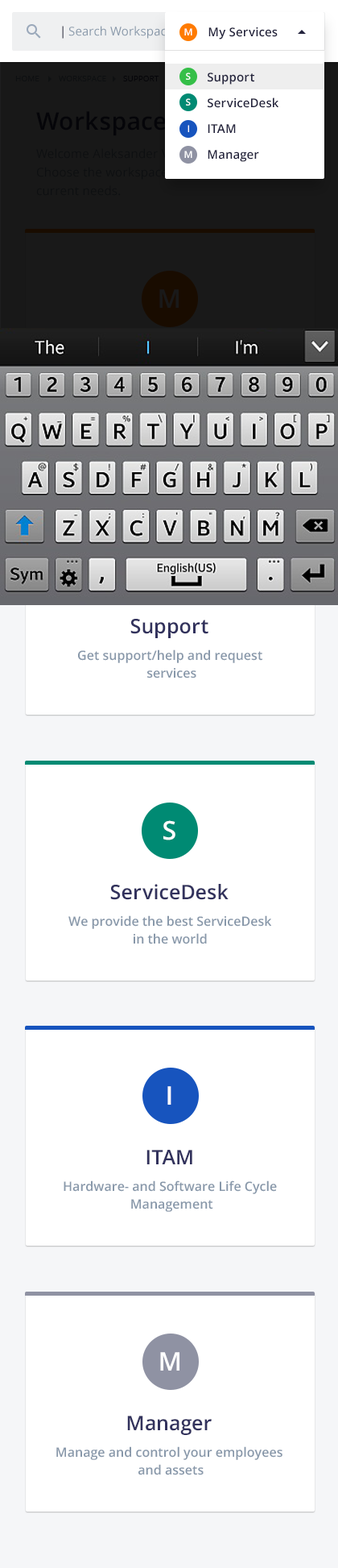
<style>
.page{position:relative;width:338px;height:1568px;background:#ffffff}
.page>*{position:absolute;margin:0}
.t1{font:12.1px "OpenSans-Semibold";letter-spacing:0.01em}
.t2{font:12.1px "OpenSans";letter-spacing:0.01em;color:#8898aa}
.t3{font:9.7px "OpenSans-Semibold";letter-spacing:0.01em;color:#ffffff}
.t4{font:12.1px "OpenSans-Semibold";letter-spacing:0.01em;color:#23233d}
.t5{font:8.1px "OpenSans";color:#0d0f11;text-transform:uppercase}
.t6{font:8.1px "OpenSans";color:#050509;text-transform:uppercase}
.t7{font:25.7px "OpenSans-Semibold";letter-spacing:0.005em;color:#191919}
.t8{font:20.1px "OpenSans-Semibold";letter-spacing:0.005em;color:#32325d}
.t9{font:12.9px/17.7px "OpenSans-Semibold";color:#8898aa}
.t10{font:25.7px "OpenSans-Semibold";letter-spacing:0.005em;color:#ffffff}
</style>
<div class="page">
<p class="t1" style="left:62px;top:26px;width:2px;height:13px">|</p>
<p class="t2" style="left:68px;top:26px;width:111px;height:13px">Search Workspaces</p>
<p class="t3" style="left:185px;top:28px;width:8px;height:7px">M</p>
<p class="t4" style="left:209px;top:27px;width:69px;height:12px">My Services</p>
<p class="t5" style="left:15px;top:76px;width:24px;height:5px">Home</p>
<p class="t5" style="left:59px;top:76px;width:47px;height:5px">Workspace</p>
<p class="t6" style="left:123px;top:76px;width:37px;height:5px">Support</p>
<p class="t3" style="left:186px;top:73px;width:5px;height:7px">S</p>
<p class="t4" style="left:208px;top:73px;width:47px;height:12px">Support</p>
<p class="t3" style="left:186px;top:98px;width:5px;height:8px">S</p>
<p class="t4" style="left:208px;top:97px;width:71px;height:11px">ServiceDesk</p>
<p class="t3" style="left:188px;top:125px;width:1px;height:7px">I</p>
<p class="t4" style="left:208px;top:124px;width:28px;height:9px">ITAM</p>
<p class="t4" style="left:208px;top:150px;width:51px;height:12px">Manager</p>
<p class="t3" style="left:185px;top:151px;width:8px;height:7px">M</p>
<p class="t7" style="left:160px;top:289px;width:19px;height:19px">M</p>
<p class="t8" style="left:131px;top:619px;width:78px;height:19px">Support</p>
<p class="t9" style="left:78px;top:649px;width:185px;height:29px;text-align:center">Get support/help and request <br>services</p>
<p class="t10" style="left:164px;top:820px;width:12px;height:20px">S</p>
<p class="t8" style="left:110px;top:884px;width:119px;height:16px">ServiceDesk</p>
<p class="t9" style="left:68px;top:915px;width:204px;height:29px;text-align:center">We provide the best ServiceDesk<br>in the world</p>
<p class="t10" style="left:168px;top:1086px;width:4px;height:19px">I</p>
<p class="t8" style="left:147px;top:1150px;width:46px;height:14px">ITAM</p>
<p class="t9" style="left:64px;top:1180px;width:213px;height:32px;text-align:center">Hardware- and Software Life Cycle <br>Management</p>
<p class="t10" style="left:160px;top:1352px;width:20px;height:19px">M</p>
<p class="t8" style="left:127px;top:1416px;width:85px;height:19px">Manager</p>
<p class="t9" style="left:56px;top:1446px;width:227px;height:29px;text-align:center">Manage and control your employees <br>and assets</p>
</div>
